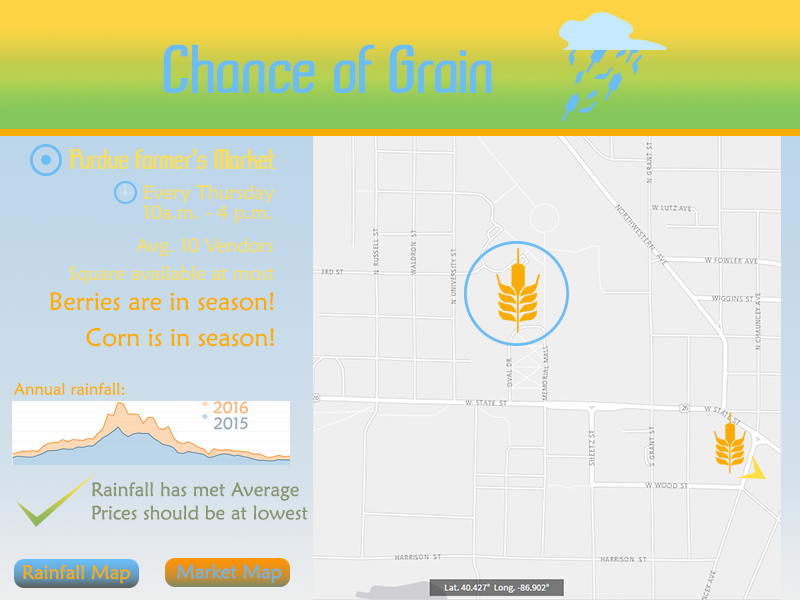
<style>
.page{position:relative;width:800px;height:600px;background:#efefef}
.page>*{position:absolute;margin:0}
.t1{font:66.7px "Komikazba";color:#6bbdf7}
.t2{font:27.8px "Komikazba";color:#ffdf42}
.t3{font:19.4px "MaiandraGD-Regular";color:#ffdf42}
.t4{font:25px "MaiandraGD-Regular";color:#fcad00}
.t5{font:16.7px "MaiandraGD-Regular";color:#fcad00}
.t6{font:12px "MaiandraGD-Regular";color:#ffb36e}
.t7{font:12px "MaiandraGD-Regular";color:#92aab7}
.t8{font:19.4px "MaiandraGD-Regular";color:#89956f}
.t9{font:19.4px "MaiandraGD-Regular";color:#fcad00}
.t10{font:19.4px "MaiandraGD-Regular";color:#6ab5ea}
</style>
<div class="page">
<p class="t1" style="left:163px;top:44px;width:329px;height:49px">Chance of Grain</p>
<p class="t2" style="left:70px;top:149px;width:205px;height:21px">Purdue Farmer’s Market</p>
<p class="t3" style="left:144px;top:185px;width:130px;height:18px">Every Thursday</p>
<p class="t3" style="left:144px;top:205px;width:127px;height:19px">10a.m. - 4 p.m.</p>
<p class="t3" style="left:136px;top:238px;width:137px;height:19px">Avg. 10 Vendors</p>
<p class="t3" style="left:69px;top:266px;width:205px;height:19px">Square available at most</p>
<p class="t4" style="left:50px;top:292px;width:224px;height:19px">Berries are in season!</p>
<p class="t4" style="left:86px;top:328px;width:188px;height:19px">Corn is in season!</p>
<p class="t5" style="left:14px;top:382px;width:111px;height:13px">Annual rainfall:</p>
<p class="t6" style="left:213px;top:401px;width:35px;height:13px">2016</p>
<p class="t7" style="left:214px;top:417px;width:34px;height:13px">2015</p>
<p class="t8" style="left:92px;top:482px;width:216px;height:38px">Rainfall has met Average<br>Prices should be at lowest</p>
<p class="t9" style="left:23px;top:565px;width:107px;height:19px">Rainfall Map</p>
<p class="t10" style="left:177px;top:564px;width:105px;height:19px">Market Map</p>
</div>
